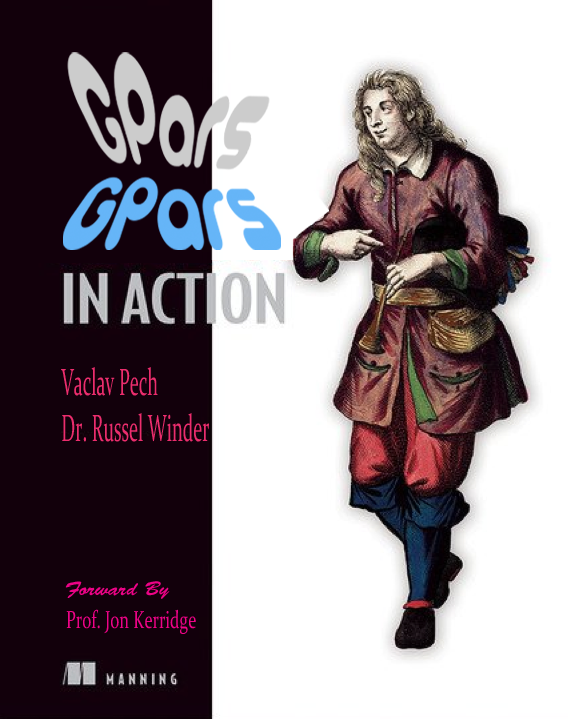
<style>
.page{position:relative;width:568px;height:719px;background:#ffffff}
.page>*{position:absolute;margin:0}
.t1{font:38.1px "Constantia";color:#eb2d6d;scale:0.49 1}
.t2{font:19.9px "BrushScriptStd";color:#ed0387;scale:1.07 1}
.t3{font:24.6px "Constantia";color:#ed0387;scale:0.68 1}
</style>
<div class="page">
<p class="t1" style="left:61px;top:367px;width:148px;height:75px">Vaclav Pech<br>Dr. Russel Winder</p>
<p class="t2" style="left:65px;top:581px;width:105px;height:18px">Forward By</p>
<p class="t3" style="left:66px;top:609px;width:130px;height:25px">Prof. Jon Kerridge</p>
</div>
